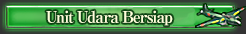
<style>
.page{position:relative;width:246px;height:34px}
.page>*{position:absolute;margin:0}
.t1{font:16px "RyuminPro-ExBold";letter-spacing:-0.08em;color:#ffffdb}
</style>
<div class="page">
<p class="t1" style="left:46px;top:10px;width:127px;height:16px">Unit Udara Bersiap</p>
</div>
